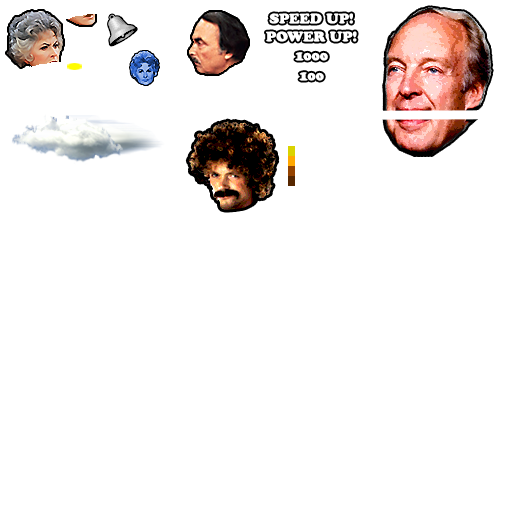
<style>
.page{position:relative;width:512px;height:512px;background:#ffffff}
.page>*{position:absolute;margin:0}
.t1{font:13.5px "CupertinoPlain";color:#ffffff;text-transform:uppercase;scale:1.06 1}
.t2{font:12.3px "CupertinoPlain";color:#ffffff;text-transform:uppercase;scale:1.06 1}
</style>
<div class="page">
<p class="t1" style="left:269px;top:13px;width:84px;height:11px">Speed Up!</p>
<p class="t1" style="left:266px;top:31px;width:91px;height:11px">POWER Up!</p>
<p class="t2" style="left:295px;top:52px;width:33px;height:9px"><span class="t1">1</span>000</p>
<p class="t2" style="left:299px;top:72px;width:25px;height:9px"><span class="t1">1</span>00</p>
</div>
